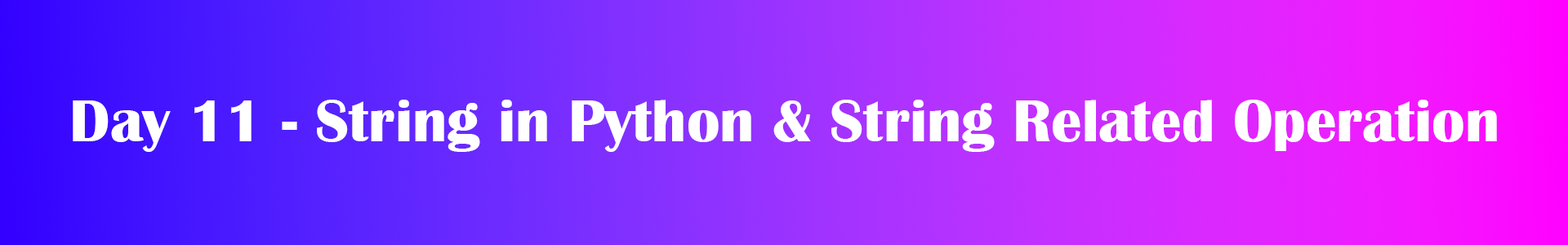
<style>
.page{position:relative;width:1568px;height:245px}
.page>*{position:absolute;margin:0}
.t1{font:61.2px "BritannicBold";color:#ffffff}
</style>
<div class="page">
<p class="t1" style="left:73px;top:100px;width:1424px;height:52px">Day 11 - String in Python &amp; String Related Operation</p>
</div>
